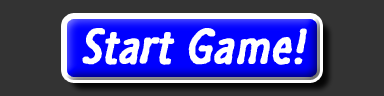
<style>
.page{position:relative;width:384px;height:96px;background:#333333}
.page>*{position:absolute;margin:0}
.t1{font:49px "SegoeMarker";color:#ffffff;font-weight:bold;font-style:italic}
</style>
<div class="page">
<p class="t1" style="left:82px;top:28px;width:225px;height:37px">Start Game!</p>
</div>
